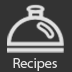
<style>
.page{position:relative;width:72px;height:72px;background:#333333}
.page>*{position:absolute;margin:0}
.t1{font:14px "MyriadPro-Regular";color:#e1e1e1}
</style>
<div class="page">
<p class="t1" style="left:13px;top:58px;width:44px;height:13px">Recipes</p>
</div>
